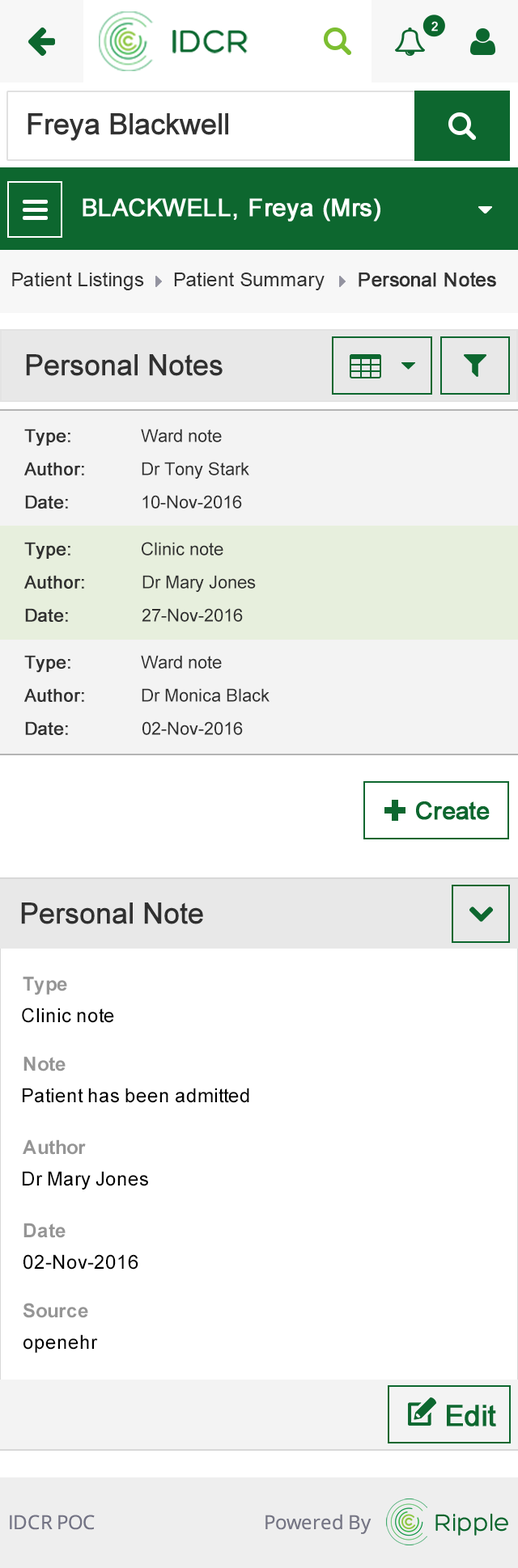
<style>
.page{position:relative;width:518px;height:1568px;background:#ffffff}
.page>*{position:absolute;margin:0}
.t1{font:19.4px "ArialMT";color:#313131}
.t2{font:19.4px "ArialMT";color:#313131;font-weight:bold}
.t3{font:29.1px "ArialMT";color:#303030;font-weight:bold}
.t4{font:17.8px "ArialMT";color:#303030;font-weight:bold}
.t5{font:17.8px "ArialMT";color:#303030}
.t6{font:19.4px "Arial-BoldMT";color:#959595}
.t7{font:19.4px "ArialMT";color:#000000}
</style>
<div class="page">
<p class="t1" style="left:12px;top:272px;width:132px;height:18px">Patient Listings</p>
<p class="t1" style="left:174px;top:272px;width:150px;height:18px">Patient Summary</p>
<p class="t2" style="left:358px;top:272px;width:138px;height:15px">Personal Notes</p>
<p class="t3" style="left:26px;top:354px;width:196px;height:22px">Personal Notes</p>
<p class="t4" style="left:24px;top:429px;width:46px;height:17px">Type:</p>
<p class="t5" style="left:141px;top:429px;width:81px;height:13px">Ward note</p>
<p class="t4" style="left:24px;top:462px;width:60px;height:13px">Author:</p>
<p class="t5" style="left:142px;top:462px;width:107px;height:17px">Dr Tony Stark</p>
<p class="t4" style="left:25px;top:495px;width:43px;height:14px">Date:</p>
<p class="t5" style="left:142px;top:495px;width:100px;height:14px">10-Nov-2016</p>
<p class="t4" style="left:24px;top:542px;width:46px;height:18px">Type:</p>
<p class="t5" style="left:142px;top:542px;width:81px;height:14px">Clinic note</p>
<p class="t4" style="left:24px;top:575px;width:60px;height:14px">Author:</p>
<p class="t5" style="left:142px;top:575px;width:114px;height:17px">Dr Mary Jones</p>
<p class="t4" style="left:25px;top:608px;width:43px;height:14px">Date:</p>
<p class="t5" style="left:142px;top:608px;width:101px;height:14px">27-Nov-2016</p>
<p class="t4" style="left:24px;top:655px;width:46px;height:18px">Type:</p>
<p class="t5" style="left:141px;top:655px;width:81px;height:14px">Ward note</p>
<p class="t4" style="left:24px;top:688px;width:60px;height:14px">Author:</p>
<p class="t5" style="left:142px;top:688px;width:127px;height:14px">Dr Monica Black</p>
<p class="t4" style="left:25px;top:721px;width:43px;height:14px">Date:</p>
<p class="t5" style="left:142px;top:721px;width:101px;height:14px">02-Nov-2016</p>
<p class="t3" style="left:21px;top:902px;width:182px;height:22px">Personal Note</p>
<p class="t6" style="left:23px;top:976px;width:44px;height:19px">Type</p>
<p class="t7" style="left:22px;top:1008px;width:92px;height:15px">Clinic note</p>
<p class="t6" style="left:23px;top:1056px;width:43px;height:15px">Note</p>
<p class="t7" style="left:23px;top:1088px;width:226px;height:15px">Patient has been admitted</p>
<p class="t6" style="left:23px;top:1139px;width:63px;height:16px">Author</p>
<p class="t7" style="left:23px;top:1171px;width:125px;height:19px">Dr Mary Jones</p>
<p class="t6" style="left:23px;top:1223px;width:43px;height:15px">Date</p>
<p class="t7" style="left:23px;top:1254px;width:115px;height:16px">02-Nov-2016</p>
<p class="t6" style="left:23px;top:1303px;width:65px;height:15px">Source</p>
<p class="t7" style="left:23px;top:1334px;width:75px;height:19px">openehr</p>
</div>
